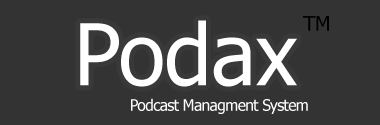
<style>
.page{position:relative;width:380px;height:125px;background:#333333}
.page>*{position:absolute;margin:0}
.t1{font:20.2px "Tahoma";color:#000000}
.t2{font:85.3px "Tahoma";color:#ffffff}
.t3{font:15.7px "Tahoma";letter-spacing:-0.04em;color:#fdfdfd}
</style>
<div class="page">
<p class="t1" style="left:303px;top:16px;width:26px;height:15px">TM</p>
<p class="t2" style="left:80px;top:20px;width:217px;height:67px">Podax</p>
<p class="t3" style="left:131px;top:98px;width:177px;height:16px">Podcast Managment System</p>
</div>
